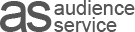
<style>
.page{position:relative;width:135px;height:32px;background:#ffffff}
.page>*{position:absolute;margin:0}
.t1{font:57px "ArialMT";letter-spacing:-0.075em;color:#555555}
.t2{font:20px/17px "ArialMT";color:#555555}
</style>
<div class="page">
<p class="t1" style="left:0px;top:1px;width:52px;height:31px">as</p>
<p class="t2" style="left:54px;top:0px;width:81px;height:32px">audience<br>service</p>
</div>
